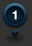
<style>
.page{position:relative;width:32px;height:46px;background:#333333}
.page>*{position:absolute;margin:0}
.t1{font:12px "HelveticaNeue-Bold";color:#ffffff}
</style>
<div class="page">
<p class="t1" style="left:12px;top:10px;width:5px;height:10px">1</p>
</div>
